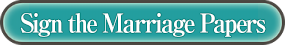
<style>
.page{position:relative;width:285px;height:45px}
.page>*{position:absolute;margin:0}
.t1{font:26px "RyuminPro-ExBold";letter-spacing:-0.08em;color:#ffffff;scale:0.9 1}
</style>
<div class="page">
<p class="t1" style="left:20px;top:13px;width:246px;height:24px">Sign the Marriage Papers</p>
</div>
